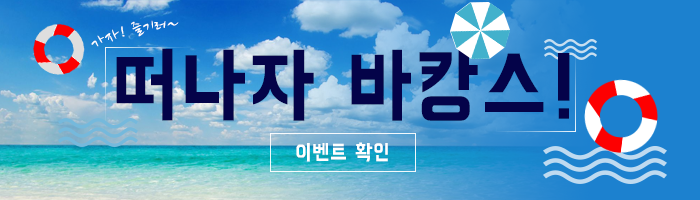
<style>
.page{position:relative;width:700px;height:200px}
.page>*{position:absolute;margin:0}
.t1{font:16.6px "NanumBrush";letter-spacing:0.04em;color:#ffffff;scale:1.11 1}
.t2{font:85.3px "BMHANNAPro";letter-spacing:0.04em;color:#040349;scale:0.9 1}
.t3{font:22px "BMHANNAPro";letter-spacing:0.04em;color:#ffffff;scale:0.9 1}
</style>
<div class="page">
<p class="t1" style="left:91px;top:20px;width:88px;height:27px;rotate:-13deg">가자! 즐기러~</p>
<p class="t2" style="left:116px;top:48px;width:454px;height:73px">떠나자 바캉스!</p>
<p class="t3" style="left:296px;top:142px;width:92px;height:20px">이벤트 확인</p>
</div>
